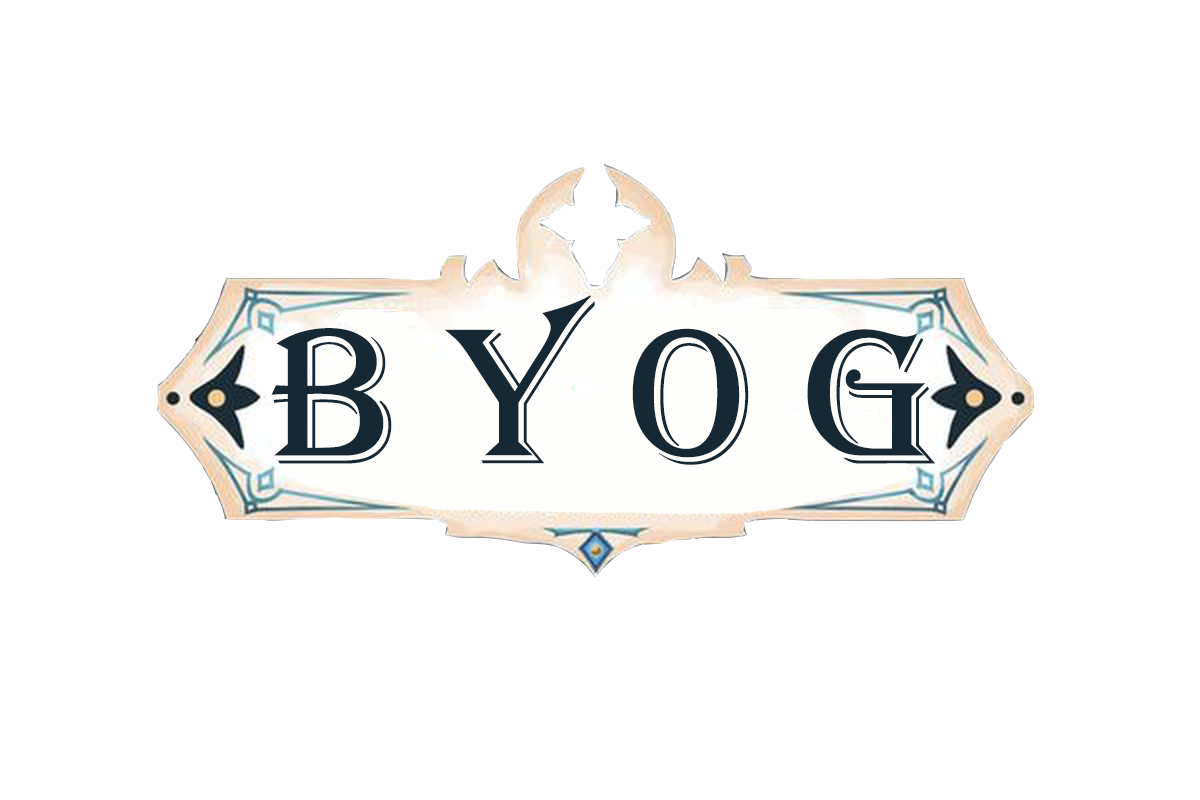
<style>
.page{position:relative;width:1200px;height:800px;background:#ffffff}
.page>*{position:absolute;margin:0}
.t1{font:200px "Algerian";color:#162834}
</style>
<div class="page">
<p class="t1" style="left:271px;top:295px;width:665px;height:170px">B Y O G</p>
</div>
